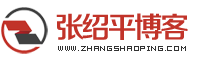
<style>
.page{position:relative;width:200px;height:60px;background:#ffffff}
.page>*{position:absolute;margin:0}
.t1{font:29.2px "FZZZHONGJW--GB1-0";letter-spacing:-0.1em;color:#c13329}
.t2{font:6.2px "04b08";letter-spacing:0.1em;color:#333333}
</style>
<div class="page">
<p class="t1" style="left:56px;top:13px;width:132px;height:27px">张绍平博客</p>
<p class="t2" style="left:58px;top:46px;width:128px;height:5px">www.zhangshaoping.com</p>
</div>
